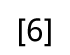
<style>
.page{position:relative;width:70px;height:55px;background:#ffffff}
.page>*{position:absolute;margin:0}
.t1{font:31.8px "DroidSans";color:#000000}
</style>
<div class="page">
<p class="t1" style="left:19px;top:18px;width:32px;height:29px">[6]</p>
</div>
